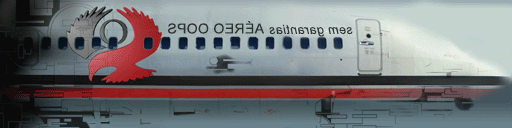
<style>
.page{position:relative;width:512px;height:128px}
.page>*{position:absolute;margin:0}
.t1{font:13.9px "ArialMT";letter-spacing:0.023em;color:#2d3232}
.t2{font:12.7px "Arial-ItalicMT";letter-spacing:0.027em;color:#343837}
</style>
<div class="page">
<p class="t1" style="left:168px;top:21px;width:96px;height:13px;rotate:180deg">AÉREO OOPS</p>
<p class="t2" style="left:269px;top:24px;width:84px;height:13px;rotate:180deg">sem garantias</p>
</div>
